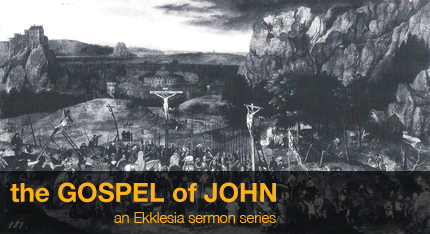
<style>
.page{position:relative;width:430px;height:234px}
.page>*{position:absolute;margin:0}
.t1{font:26.2px "HelveticaNeue-Bold";color:#feb115}
.t2{font:14.6px "HelveticaNeue-Light";color:#feb115}
</style>
<div class="page">
<p class="t1" style="left:10px;top:182px;width:266px;height:21px">the GOSPEL of JOHN</p>
<p class="t2" style="left:114px;top:212px;width:162px;height:11px">an Ekklesia sermon series</p>
</div>
